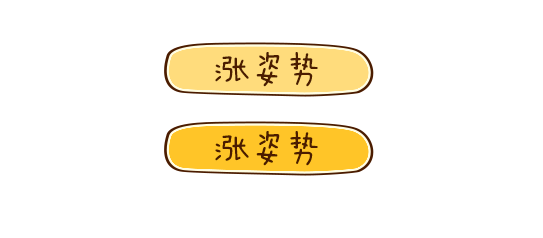
<style>
.page{position:relative;width:543px;height:238px;background:#ffffff}
.page>*{position:absolute;margin:0}
.t1{font:36px "FZMWJW--GB1-0";color:#4b1c00}
</style>
<div class="page">
<p class="t1" style="left:215px;top:52px;width:103px;height:35px">涨姿势</p>
<p class="t1" style="left:215px;top:131px;width:103px;height:35px">涨姿势</p>
</div>
